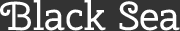
<style>
.page{position:relative;width:180px;height:31px;background:#333333}
.page>*{position:absolute;margin:0}
.t1{font:40px "CherrySwash-Regular";color:#ffffff}
</style>
<div class="page">
<p class="t1" style="left:0px;top:0px;width:180px;height:31px">Black Sea</p>
</div>
